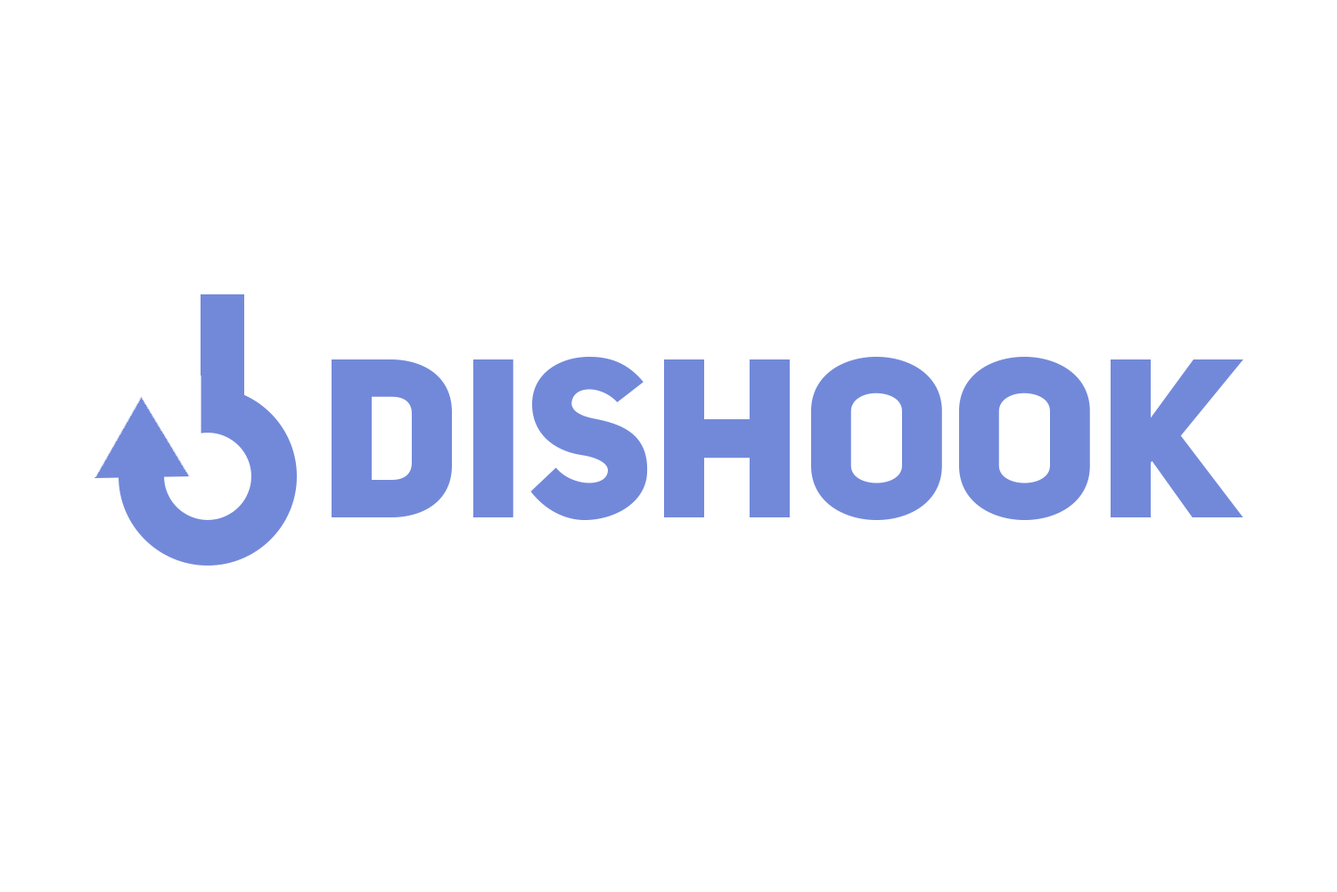
<style>
.page{position:relative;width:1337px;height:892px;background:#ffffff}
.page>*{position:absolute;margin:0}
.t1{font:222.9px "UniSansHeavyCAPS";color:#7289da}
</style>
<div class="page">
<p class="t1" style="left:332px;top:357px;width:912px;height:163px">dishook</p>
</div>
